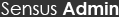
<style>
.page{position:relative;width:119px;height:17px;background:#333333}
.page>*{position:absolute;margin:0}
.t1{font:17.9px "CenturyGothic";color:#ffffff}
.t2{font:17.9px "CenturyGothic-Bold";color:#ffffff}
</style>
<div class="page">
<p class="t1" style="left:1px;top:2px;width:118px;height:13px">Sensus <span class="t2">Admin</span></p>
</div>
